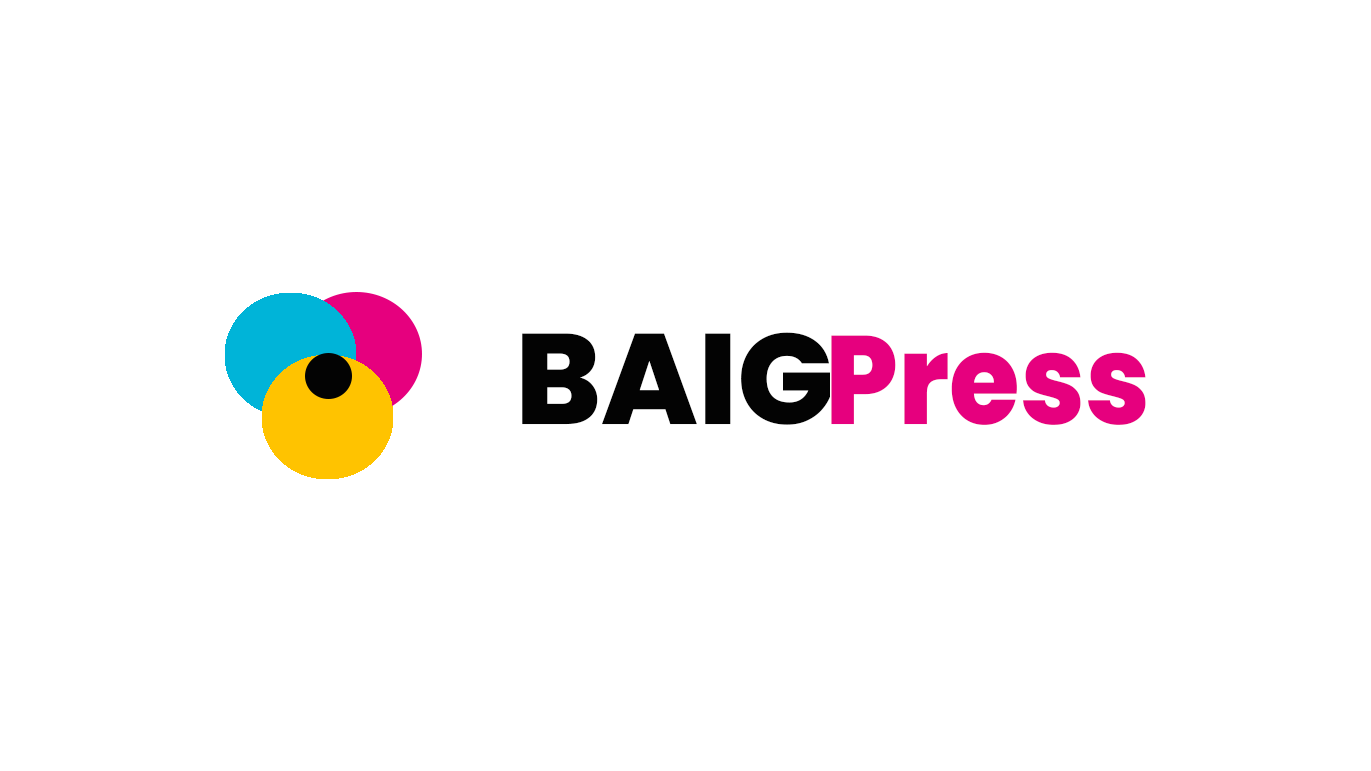
<style>
.page{position:relative;width:1371px;height:771px;background:#ffffff}
.page>*{position:absolute;margin:0}
.t1{font:128.3px "Poppins-ExtraBold";color:#030303}
.t2{font:125.4px "Poppins-ExtraBold";color:#e6007e;scale:0.91 1}
</style>
<div class="page">
<p class="t1" style="left:522px;top:332px;width:308px;height:93px">BAIG</p>
<p class="t2" style="left:831px;top:335px;width:315px;height:90px">Press</p>
</div>
